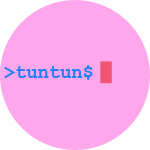
<style>
.page{position:relative;width:150px;height:150px;background:#ffa7ed}
.page>*{position:absolute;margin:0}
.t1{font:18.8px "CourierNewPS-BoldMT";color:#2481f3}
</style>
<div class="page">
<p class="t1" style="left:4px;top:65px;width:89px;height:15px">&gt;tuntun$</p>
</div>
